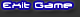
<style>
.page{position:relative;width:80px;height:17px}
.page>*{position:absolute;margin:0}
.t1{font:10px "ThundergodII";color:#ffffff}
</style>
<div class="page">
<p class="t1" style="left:3px;top:2px;width:69px;height:6px">Exit Game</p>
</div>
